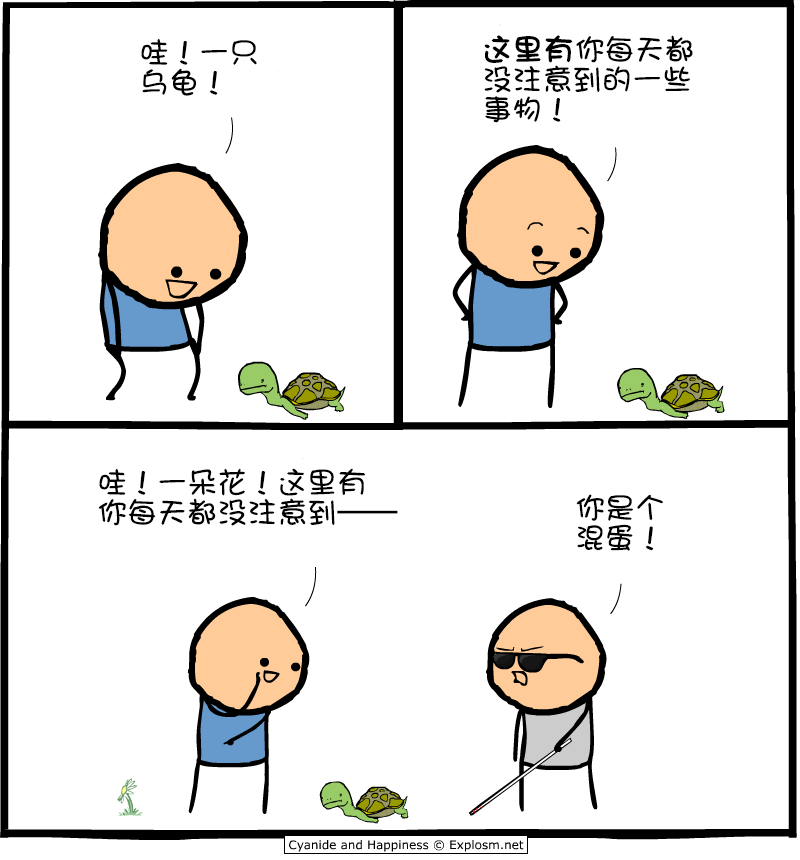
<style>
.page{position:relative;width:800px;height:860px;background:#ffffff}
.page>*{position:absolute;margin:0}
.t1{font:30px/30px "DFGirl";color:#000000}
.t2{font:30px/30px "DFGirl";color:#000000;font-weight:bold}
</style>
<div class="page">
<p class="t1" style="left:141px;top:38px;width:116px;height:58px">哇！一只<br>乌龟！</p>
<p class="t1" style="left:484px;top:35px;width:209px;height:88px"><span class="t2">这里有</span>你每天都<br>没注意到的一些<br>事物！</p>
<p class="t1" style="left:98px;top:468px;width:300px;height:58px">哇！一朵花！这里有<br>你每天都没注意到——</p>
<p class="t1" style="left:576px;top:494px;width:87px;height:57px">你是个<br>混蛋！</p>
</div>
